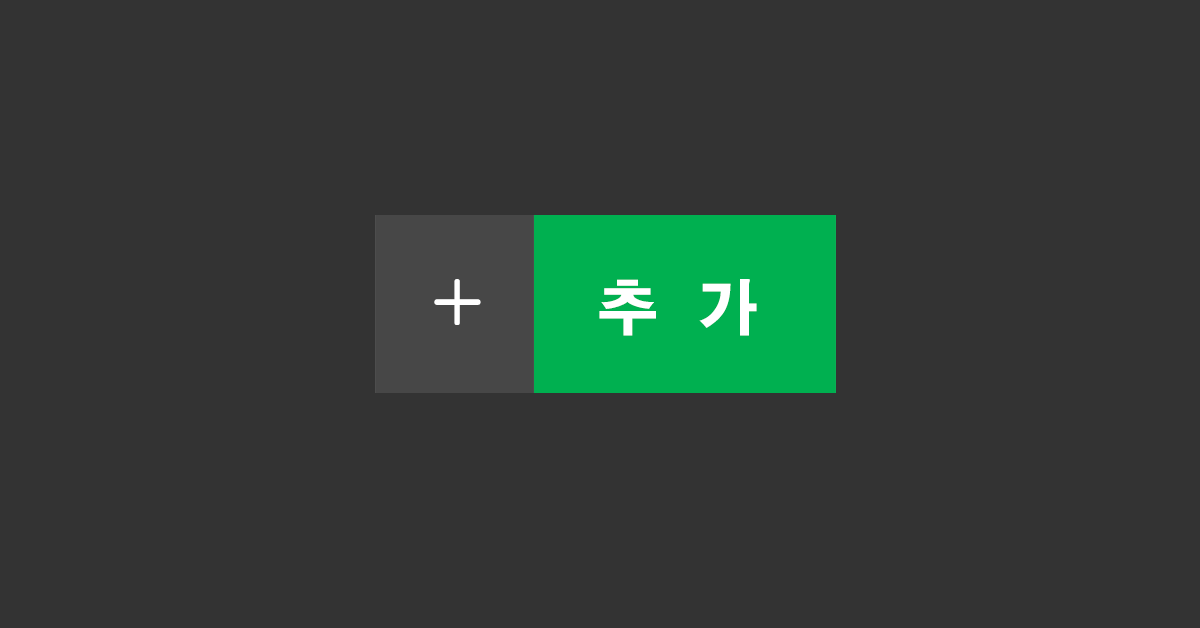
<style>
.page{position:relative;width:1200px;height:628px;background:#333333}
.page>*{position:absolute;margin:0}
.t1{font:90.4px "Gulim";color:#ffffff}
.t2{font:60px "H2gtrE";color:#ffffff}
</style>
<div class="page">
<p class="t1" style="left:434px;top:279px;width:47px;height:46px;rotate:-90deg">+</p>
<p class="t2" style="left:599px;top:279px;width:158px;height:57px">추  가</p>
</div>
